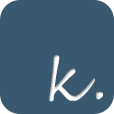
<style>
.page{position:relative;width:114px;height:114px;background:#395971}
.page>*{position:absolute;margin:0}
.t1{font:60px "SegoeScript"}
</style>
<div class="page">
<p class="t1" style="left:49px;top:55px;width:54px;height:47px">k.</p>
</div>
